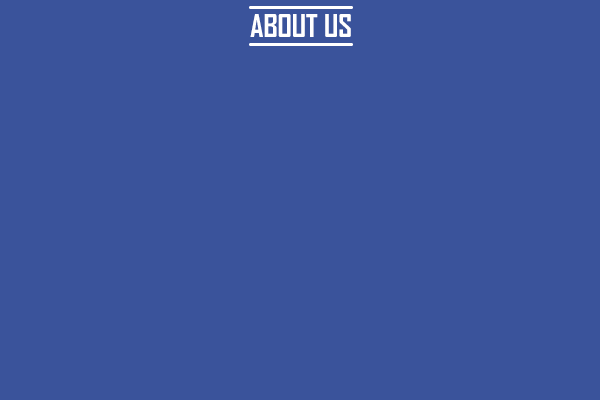
<style>
.page{position:relative;width:600px;height:400px;background:#3a539b}
.page>*{position:absolute;margin:0}
.t1{font:30px "AgencyFB-Bold";color:#ffffff}
</style>
<div class="page">
<p class="t1" style="left:250px;top:14px;width:101px;height:23px">ABOUT US</p>
</div>
